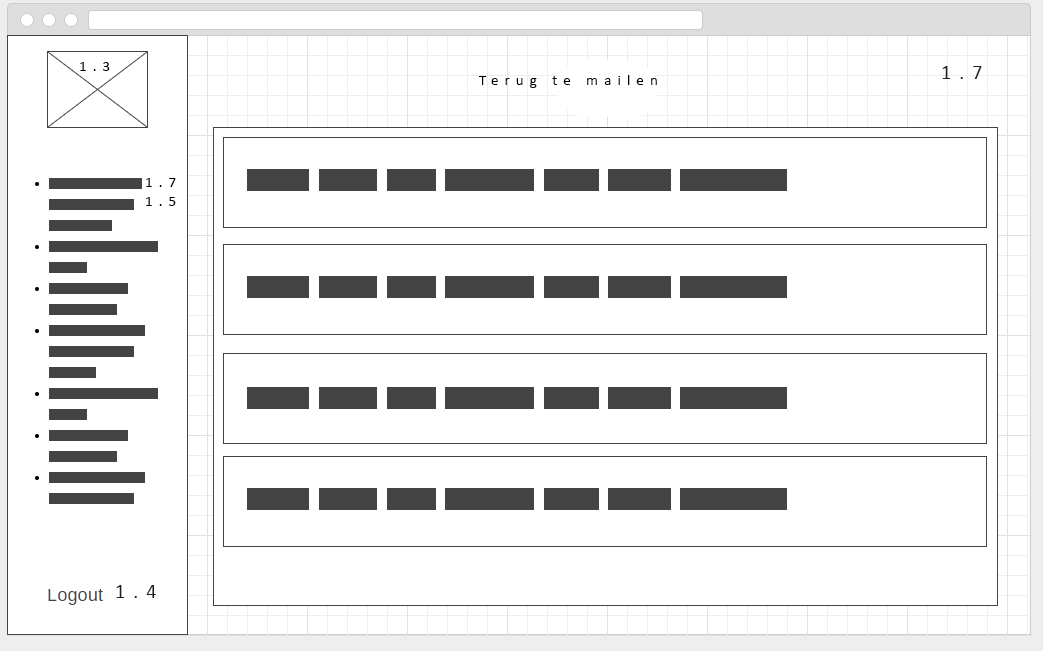
<style>
.page{position:relative;width:1043px;height:651px;background:#ffffff}
.page>*{position:absolute;margin:0}
.t1{font:15.1px "Calibri";letter-spacing:0.4em;color:#000000}
</style>
<div class="page">
<p class="t1" style="left:80px;top:62px;width:30px;height:9px">1.3</p>
<p class="t1" style="left:479px;top:75px;width:178px;height:13px">Terug te mailen</p>
<p class="t1" style="left:146px;top:178px;width:30px;height:9px">1.7</p>
<p class="t1" style="left:146px;top:197px;width:30px;height:9px">1.5</p>
</div>
